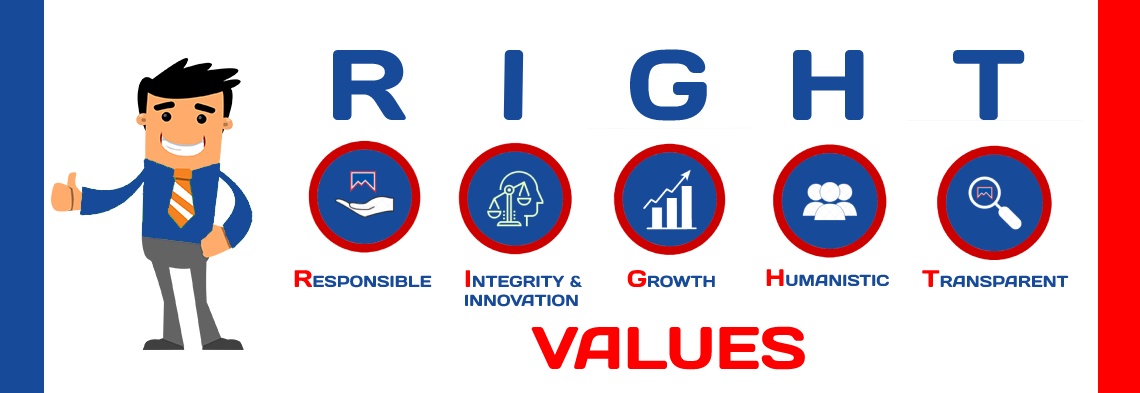
<style>
.page{position:relative;width:1140px;height:393px;background:#ffffff}
.page>*{position:absolute;margin:0}
.t1{font:100px "Days";color:#174b9a}
.t2{font:16px "Days";color:#174b9a}
.t3{font:24px "Days";color:#ff0000}
.t4{font:60px "Days";color:#ff0000}
</style>
<div class="page">
<p class="t1" style="left:333px;top:50px;width:74px;height:70px">R</p>
<p class="t1" style="left:503px;top:49px;width:21px;height:72px;rotate:1deg">I</p>
<p class="t1" style="left:630px;top:49px;width:77px;height:72px">G</p>
<p class="t1" style="left:793px;top:50px;width:71px;height:70px">H</p>
<p class="t1" style="left:953px;top:50px;width:72px;height:70px">T</p>
<p class="t2" style="left:294px;top:270px;width:138px;height:18px"><span class="t3">R</span>ESPONSIBLE</p>
<p class="t2" style="left:465px;top:270px;width:118px;height:37px"><span class="t3">I</span>NTEGRITY &amp;<br>INNOVATION</p>
<p class="t2" style="left:627px;top:270px;width:88px;height:18px"><span class="t3">G</span>ROWTH</p>
<p class="t2" style="left:766px;top:269px;width:123px;height:18px"><span class="t3">H</span>UMANISTIC</p>
<p class="t2" style="left:922px;top:270px;width:147px;height:18px"><span class="t3">T</span>RANSPARENT</p>
<p class="t4" style="left:531px;top:326px;width:274px;height:44px">VALUES</p>
</div>
